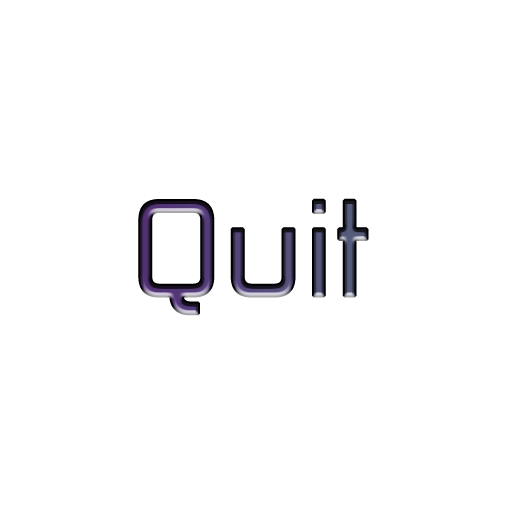
<style>
.page{position:relative;width:512px;height:512px;background:#ffffff}
.page>*{position:absolute;margin:0}
.t1{font:130px "ZektonRg-Regular";font-weight:bold}
</style>
<div class="page">
<p class="t1" style="left:138px;top:198px;width:231px;height:118px">Quit</p>
</div>
